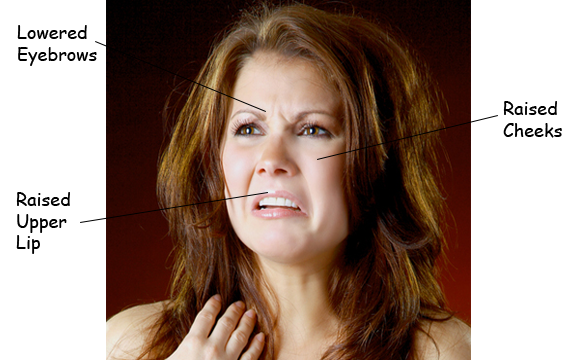
<style>
.page{position:relative;width:576px;height:360px;background:#ffffff}
.page>*{position:absolute;margin:0}
.t1{font:18px "ComicSansMS";color:#000000}
</style>
<div class="page">
<p class="t1" style="left:17px;top:25px;width:80px;height:41px">Lowered<br>Eyebrows</p>
<p class="t1" style="left:503px;top:101px;width:59px;height:37px">Raised<br>Cheeks</p>
<p class="t1" style="left:16px;top:192px;width:54px;height:62px">Raised<br>Upper<br>Lip</p>
</div>
